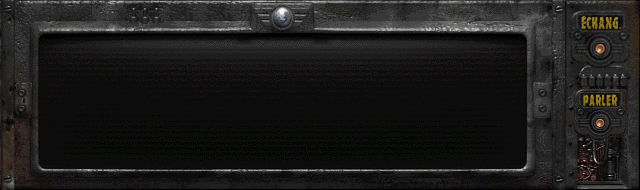
<style>
.page{position:relative;width:640px;height:190px;background:#0c0c0c}
.page>*{position:absolute;margin:0}
.t1{font:14.7px "FalloutDecayed";letter-spacing:0.075em;color:#937b20;scale:0.8 1}
.t2{font:13.7px "FalloutDecayed";letter-spacing:0.075em;color:#967f22;scale:0.77 1}
</style>
<div class="page">
<p class="t1" style="left:581px;top:16px;width:40px;height:13px">ÉCHANG.</p>
<p class="t2" style="left:583px;top:94px;width:34px;height:12px">PARLER</p>
</div>
